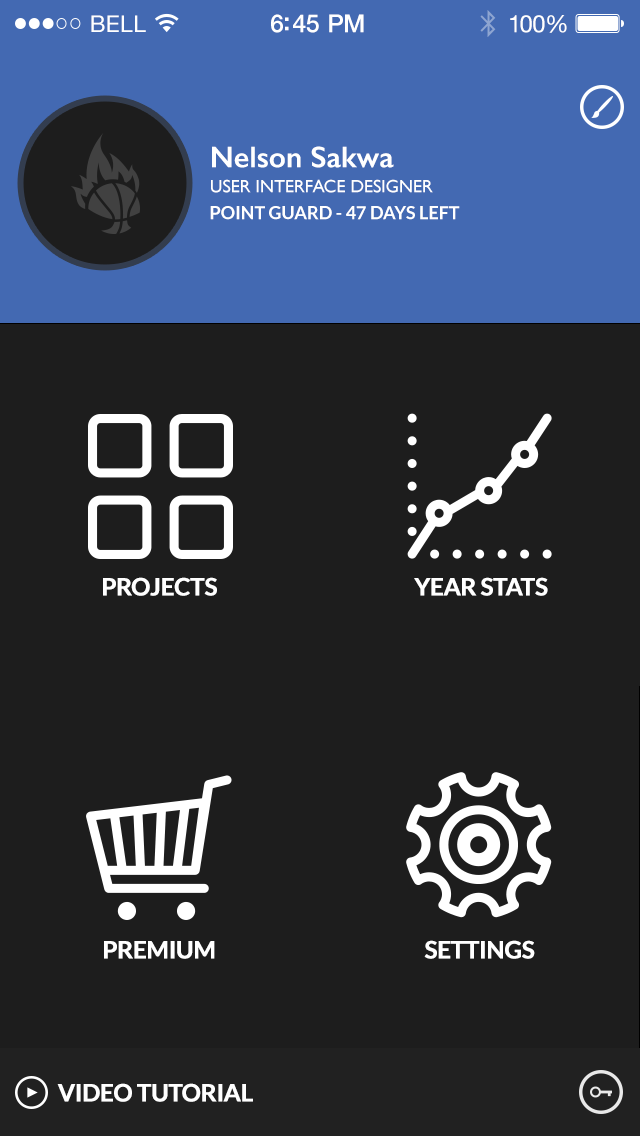
<style>
.page{position:relative;width:640px;height:1136px;background:#1d1d1d}
.page>*{position:absolute;margin:0}
.t1{font:30px "GillSans-SemiBold";color:#ffffff}
.t2{font:18px "GillSans";color:#ffffff;text-transform:uppercase}
.t3{font:18px "Lato-Bold";color:#ffffff;text-transform:uppercase}
.t4{font:24px "Lato-Bold";letter-spacing:-0.02em;color:#ffffff;text-transform:uppercase;font-weight:bold}
</style>
<div class="page">
<p class="t1" style="left:212px;top:146px;width:182px;height:22px">Nelson Sakwa</p>
<p class="t2" style="left:211px;top:179px;width:222px;height:14px">user interface designer</p>
<p class="t3" style="left:210px;top:206px;width:250px;height:14px">point guard - 47 days left</p>
<p class="t4" style="left:103px;top:577px;width:114px;height:19px">projects</p>
<p class="t4" style="left:414px;top:577px;width:134px;height:19px">year stats</p>
<p class="t4" style="left:104px;top:941px;width:111px;height:18px">premium</p>
<p class="t4" style="left:424px;top:940px;width:111px;height:19px">Settings</p>
<p class="t4" style="left:57px;top:1083px;width:196px;height:19px">video tutorial</p>
</div>
